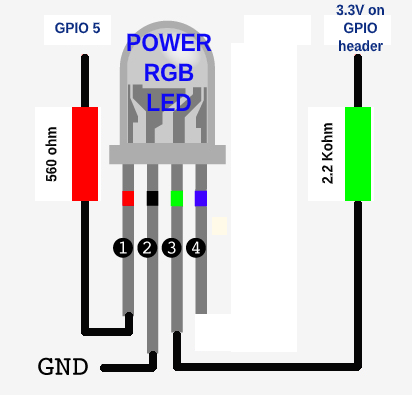
<style>
.page{position:relative;width:412px;height:395px;background:#f5f5f5}
.page>*{position:absolute;margin:0}
.t1{font:15px "Arial-BoldMT";color:#0a2b80;scale:0.91 1}
.t2{font:25px "Arial-BoldMT";color:#0e08f5;scale:0.91 1}
.t3{font:15px "Arial-BoldMT";color:#060606;scale:0.91 1}
</style>
<div class="page">
<p class="t1" style="left:336px;top:4px;width:48px;height:48px;text-align:center">3.3V on GPIO header</p>
<p class="t1" style="left:55px;top:22px;width:45px;height:12px">GPIO 5</p>
<p class="t2" style="left:127px;top:33px;width:85px;height:78px;text-align:center">POWER<br>RGB<br>LED</p>
<p class="t3" style="left:321px;top:123px;width:12px;height:61px;rotate:-90deg">2.2 Kohm</p>
<p class="t3" style="left:45px;top:127px;width:12px;height:55px;rotate:-90deg">560 ohm</p>
</div>
